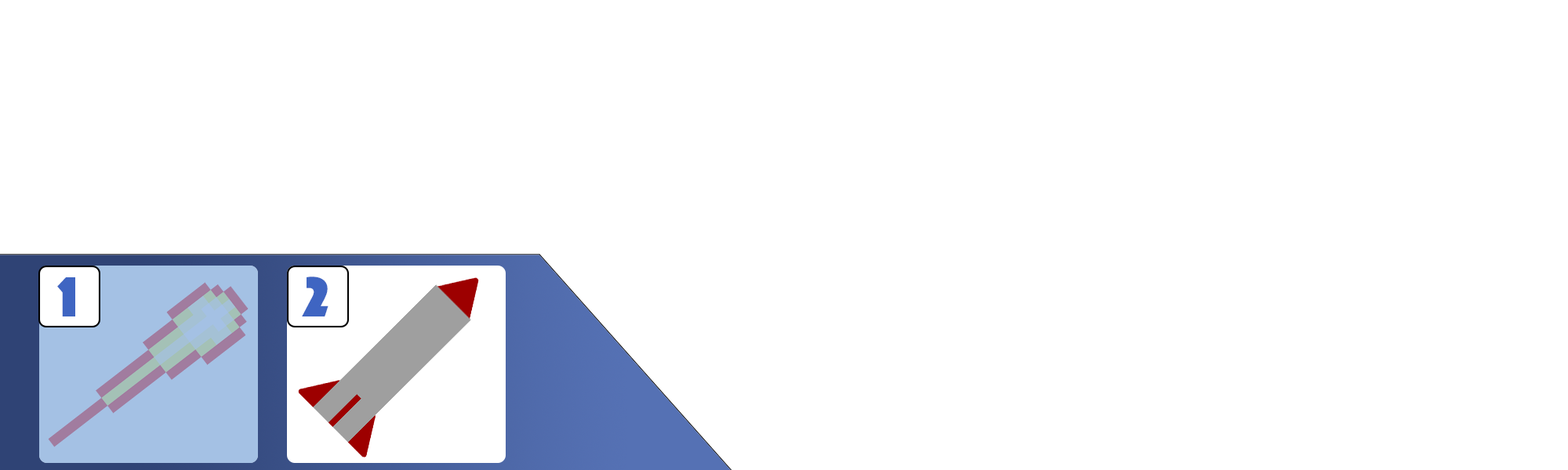
<style>
.page{position:relative;width:1568px;height:470px;background:#ffffff}
.page>*{position:absolute;margin:0}
.t1{font:58.8px "Phosphate-Solid";color:#3f65c2}
</style>
<div class="page">
<p class="t1" style="left:57px;top:278px;width:18px;height:39px">1</p>
<p class="t1" style="left:302px;top:277px;width:26px;height:40px">2</p>
</div>
